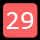
<style>
.page{position:relative;width:40px;height:40px;background:#fc6060}
.page>*{position:absolute;margin:0}
.t1{font:27px "Consolas";color:#ffffff}
</style>
<div class="page">
<p class="t1" style="left:6px;top:12px;width:28px;height:17px">29</p>
</div>
